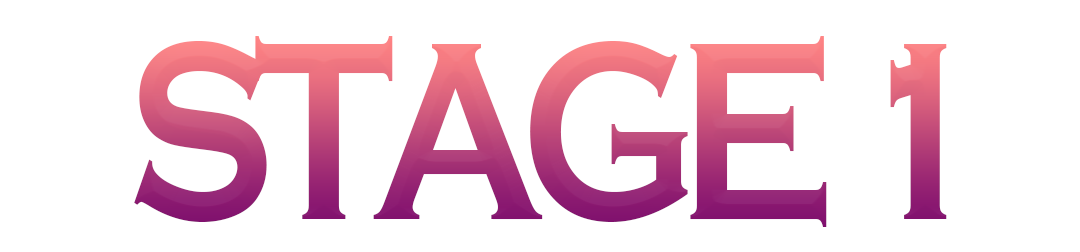
<style>
.page{position:relative;width:1080px;height:252px;background:#ffffff}
.page>*{position:absolute;margin:0}
.t1{font:263.5px "CopperplateGothic-Bold";letter-spacing:-0.1em;scale:0.79 1}
</style>
<div class="page">
<p class="t1" style="left:134px;top:36px;width:813px;height:191px">STAGE 1</p>
</div>
